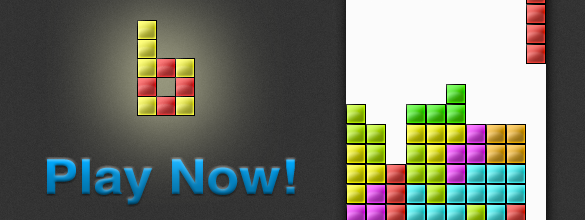
<style>
.page{position:relative;width:585px;height:220px}
.page>*{position:absolute;margin:0}
.t1{font:48px "Helvetica-Bold";letter-spacing:0.007em;scale:1.1 1}
</style>
<div class="page">
<p class="t1" style="left:47px;top:159px;width:248px;height:46px">Play Now!</p>
</div>
